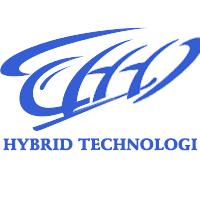
<style>
.page{position:relative;width:200px;height:200px;background:#ffffff}
.page>*{position:absolute;margin:0}
.t1{font:16px "SchneidlerBT-Black";color:#355dd4}
</style>
<div class="page">
<p class="t1" style="left:3px;top:138px;width:194px;height:13px">HYBRID TECHNOLOGI</p>
</div>
